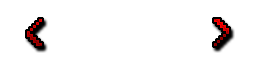
<style>
.page{position:relative;width:256px;height:64px;background:#ffffff}
.page>*{position:absolute;margin:0}
.t1{font:48px "Alagard"}
</style>
<div class="page">
<p class="t1" style="left:27px;top:19px;width:202px;height:27px">&lt;           &gt;</p>
</div>
